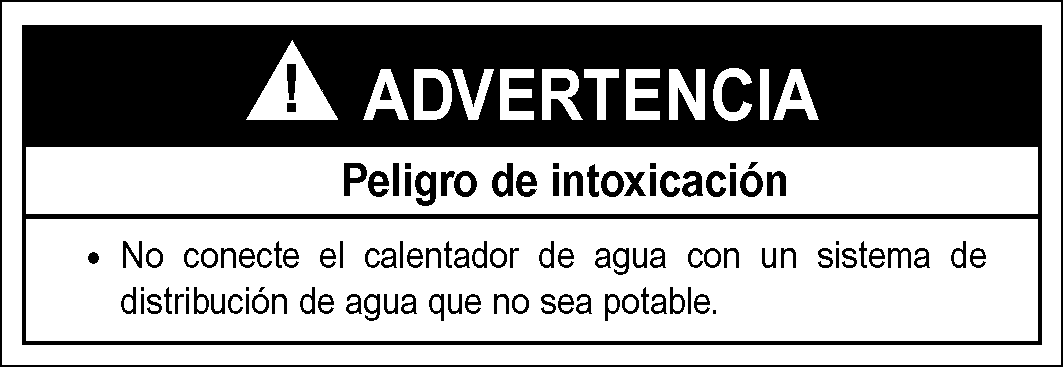
<style>
.page{position:relative;width:1063px;height:367px;background:#ffffff}
.page>*{position:absolute;margin:0}
.t1{font:70.8px "Arial-BoldMT";color:#ffffff;scale:0.9 1}
.t2{font:45.8px "Arial-BoldMT";color:#010101;scale:0.9 1}
.t3{font:37.5px/45.8px "ArialMT";color:#010101;scale:0.9 1}
.t4{font:41.7px "Arial-BoldMT";color:#010101;scale:0.9 1}
</style>
<div class="page">
<p class="t1" style="left:363px;top:68px;width:456px;height:53px">ADVERTENCIA</p>
<p class="t2" style="left:344px;top:162px;width:442px;height:44px">Peligro de intoxicación</p>
<p class="t3" style="left:121px;top:241px;width:865px;height:80px;text-align:justify">No conecte el calentador de agua con un sistema de distribución de agua que no sea potable.</p>
<p class="t4" style="left:88px;top:252px;width:11px;height:12px">•</p>
</div>
